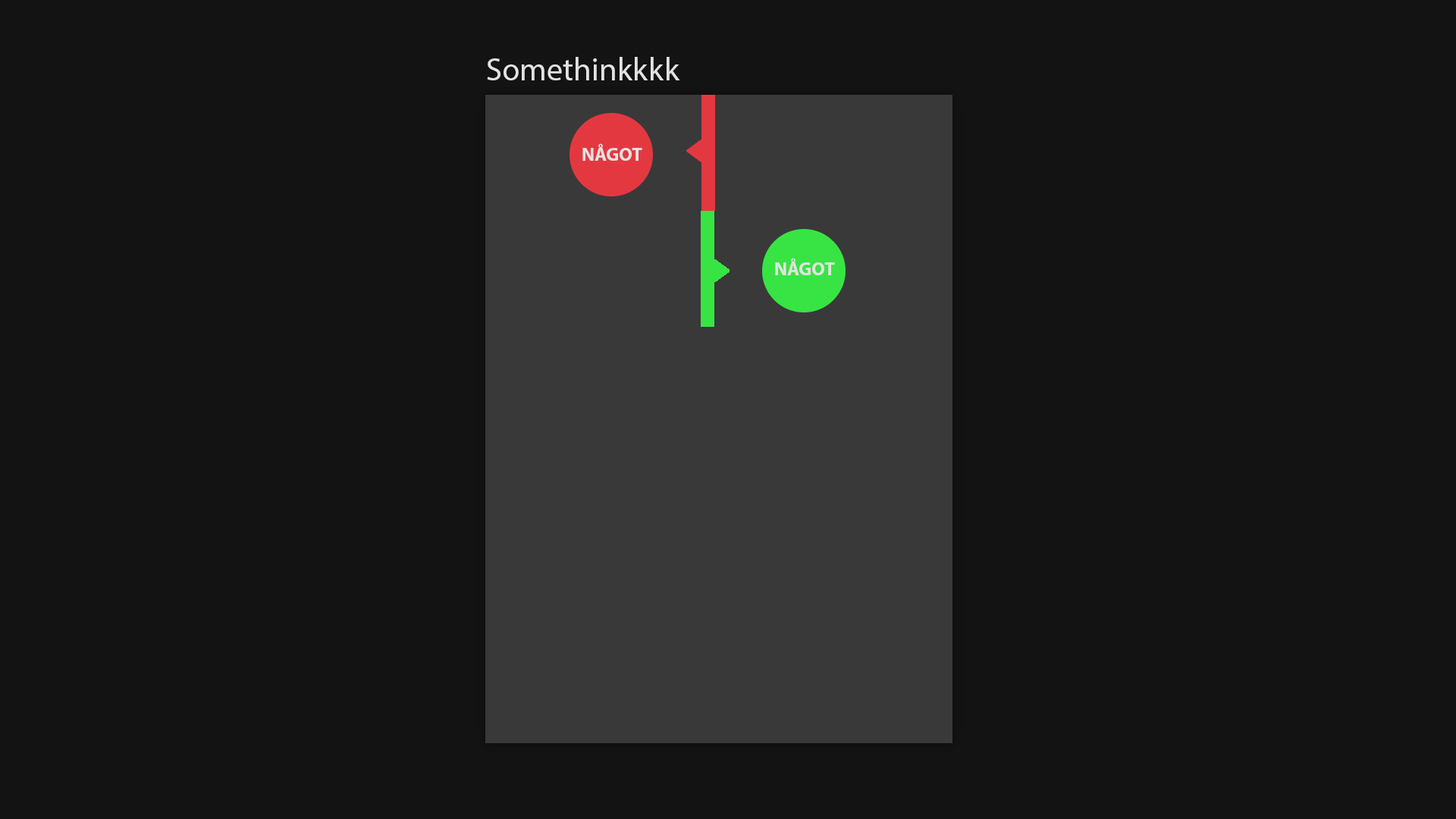
<style>
.page{position:relative;width:1456px;height:819px;background:#131313}
.page>*{position:absolute;margin:0}
.t1{font:32.3px "MyriadPro-Regular";color:#e2e2e2}
.t2{font:18.7px "MyriadPro-Bold";color:#e2e2e2}
</style>
<div class="page">
<p class="t1" style="left:487px;top:57px;width:193px;height:23px">Somethinkkkk</p>
<p class="t2" style="left:582px;top:143px;width:60px;height:18px">NÅGOT</p>
<p class="t2" style="left:775px;top:258px;width:60px;height:17px">NÅGOT</p>
</div>
